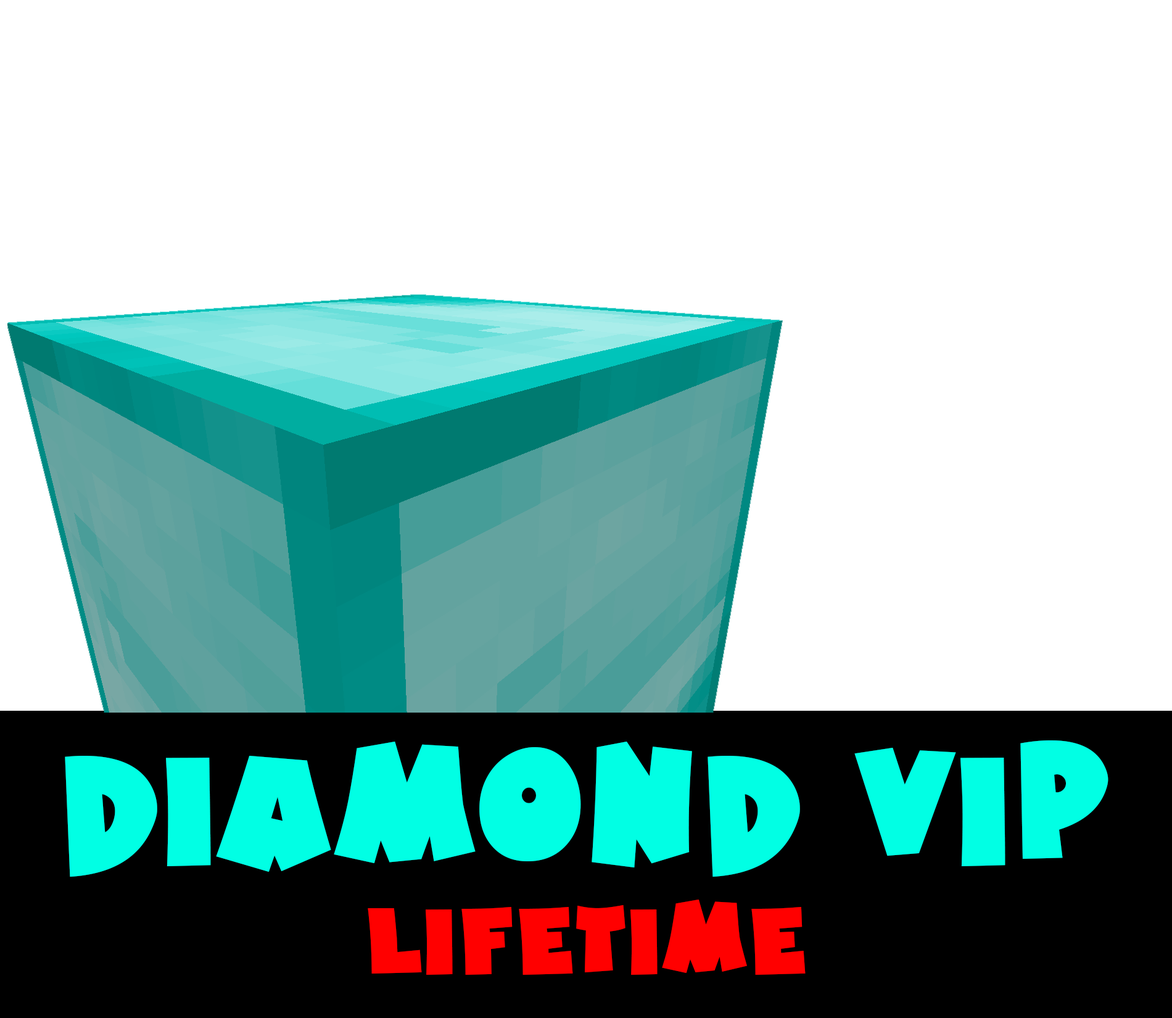
<style>
.page{position:relative;width:1172px;height:1018px;background:#ffffff}
.page>*{position:absolute;margin:0}
.t1{font:154.2px "HotMustardBTN";color:#01ffe4}
.t2{font:92.5px "HotMustardBTN";color:#ff0000}
</style>
<div class="page">
<p class="t1" style="left:65px;top:740px;width:1043px;height:136px">dIAMOND vip</p>
<p class="t2" style="left:368px;top:899px;width:437px;height:75px">Lifetime</p>
</div>
